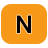
<style>
.page{position:relative;width:48px;height:48px;background:#f89819}
.page>*{position:absolute;margin:0}
.t1{font:24px "ArialMT";color:#000000;font-weight:bold}
</style>
<div class="page">
<p class="t1" style="left:17px;top:15px;width:14px;height:18px">N</p>
</div>
